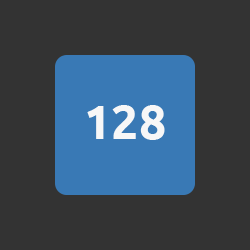
<style>
.page{position:relative;width:250px;height:250px;background:#333333}
.page>*{position:absolute;margin:0}
.t1{font:48px "Ubuntu-Bold";color:#f7f7f7}
</style>
<div class="page">
<p class="t1" style="left:87px;top:105px;width:78px;height:35px">128</p>
</div>
